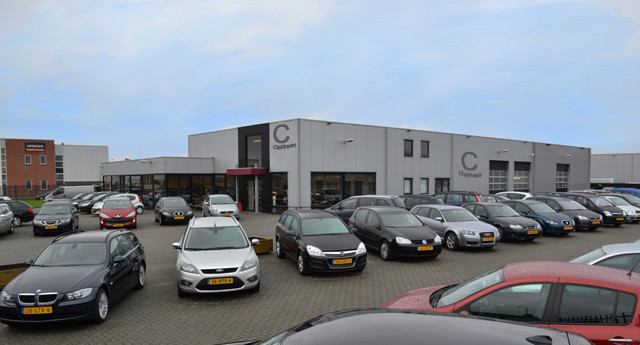
<style>
.page{position:relative;width:640px;height:345px}
.page>*{position:absolute;margin:0}
.t1{font:25px "ArialMT";color:#5e545c;font-weight:bold}
.t2{font:5.3px "ArialMT";color:#5e545c;font-weight:bold;scale:0.96 1}
</style>
<div class="page">
<p class="t1" style="left:273px;top:124px;width:17px;height:20px;rotate:-3deg">C</p>
<p class="t2" style="left:273px;top:143px;width:24px;height:7px;rotate:-7deg">Clappaert</p>
<p class="t1" style="left:461px;top:151px;width:17px;height:20px;rotate:6deg">C</p>
<p class="t2" style="left:458px;top:171px;width:24px;height:7px;rotate:6deg">Clappaert</p>
</div>
